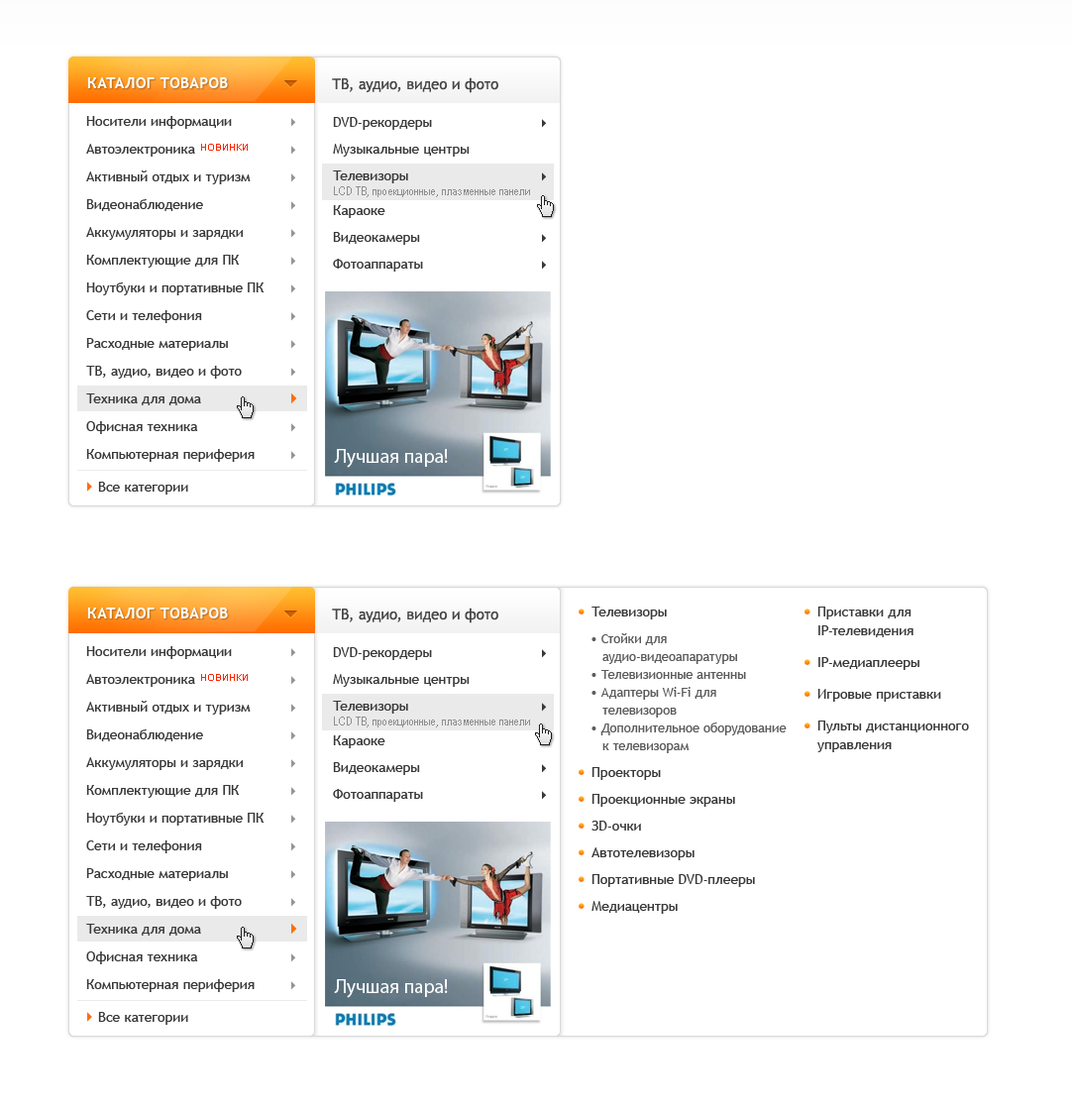
<style>
.page{position:relative;width:1072px;height:1112px;background:#ffffff}
.page>*{position:absolute;margin:0}
.t1{font:14.9px "TrebuchetMS-Bold";letter-spacing:0.03em;color:#ffffff}
.t2{font:14.9px "TrebuchetMS";color:#464646}
.t3{font:13.9px/27.8px "TrebuchetMS";color:#393939}
.t4{font:13.9px/26.8px "TrebuchetMS";color:#393939}
.t5{font:9.9px "ArialMT";color:#ff2400}
.t6{font:11.9px "ArialNarrow";color:#8f8f8f}
.t7{font:19.8px "MyriadPro-Regular";color:#ffffff}
.t8{font:13.9px/18.8px "TrebuchetMS";color:#393939}
.t9{font:12.9px/17.8px "TrebuchetMS";color:#5b5b5b}
</style>
<div class="page">
<p class="t1" style="left:87px;top:77px;width:141px;height:11px">КАТАЛОГ ТОВАРОВ</p>
<p class="t2" style="left:332px;top:77px;width:167px;height:16px">ТВ, аудио, видео и фото</p>
<p class="t3" style="left:86px;top:116px;width:179px;height:379px">Носители информации<br>Автоэлектроника<br>Активный отдых и туризм<br>Видеонаблюдение<br>Аккумуляторы и зарядки<br>Комплектующие для ПК<br>Ноутбуки и портативные ПК<br>Сети и телефония<br>Расходные материалы<br>ТВ, аудио, видео и фото<br>Техника для дома<br>Офисная техника<br>Компьютерная периферия<br>Все категории</p>
<p class="t4" style="left:333px;top:117px;width:137px;height:155px">DVD-рекордеры<br>Музыкальные центры<br>Телевизоры<br>Караоке<br>Видеокамеры<br>Фотоаппараты</p>
<p class="t5" style="left:201px;top:144px;width:47px;height:7px">НОВИНКИ</p>
<p class="t6" style="left:334px;top:186px;width:196px;height:11px">LCD ТВ, проекционные, плазменные панели</p>
<p class="t7" style="left:334px;top:449px;width:114px;height:19px">Лучшая пара!</p>
<p class="t1" style="left:87px;top:608px;width:141px;height:10px">КАТАЛОГ ТОВАРОВ</p>
<p class="t2" style="left:332px;top:608px;width:167px;height:15px">ТВ, аудио, видео и фото</p>
<p class="t4" style="left:592px;top:607px;width:163px;height:307px">Телевизоры<br><br><br><br><br><br>Проекторы<br>Проекционные экраны<br>ЗD-очки<br>Автотелевизоры<br>Портативные DVD-плееры<br>Медиацентры</p>
<p class="t8" style="left:818px;top:607px;width:151px;height:145px">Приставки для IP-телевидения<br>IP-медиаплееры<br>Игровые приставки<br>Пульты дистанционного управления</p>
<p class="t9" style="left:592px;top:633px;width:195px;height:120px">• Стойки для аудио-видеоапаратуры<br>• Телевизионные антенны<br>• Адаптеры Wi-Fi для телевизоров<br>• Дополнительное оборудование к телевизорам</p>
<p class="t3" style="left:86px;top:646px;width:179px;height:379px">Носители информации<br>Автоэлектроника<br>Активный отдых и туризм<br>Видеонаблюдение<br>Аккумуляторы и зарядки<br>Комплектующие для ПК<br>Ноутбуки и портативные ПК<br>Сети и телефония<br>Расходные материалы<br>ТВ, аудио, видео и фото<br>Техника для дома<br>Офисная техника<br>Компьютерная периферия<br>Все категории</p>
<p class="t4" style="left:333px;top:647px;width:137px;height:155px">DVD-рекордеры<br>Музыкальные центры<br>Телевизоры<br>Караоке<br>Видеокамеры<br>Фотоаппараты</p>
<p class="t5" style="left:201px;top:674px;width:47px;height:7px">НОВИНКИ</p>
<p class="t6" style="left:334px;top:717px;width:196px;height:10px">LCD ТВ, проекционные, плазменные панели</p>
<p class="t7" style="left:334px;top:979px;width:114px;height:19px">Лучшая пара!</p>
</div>
